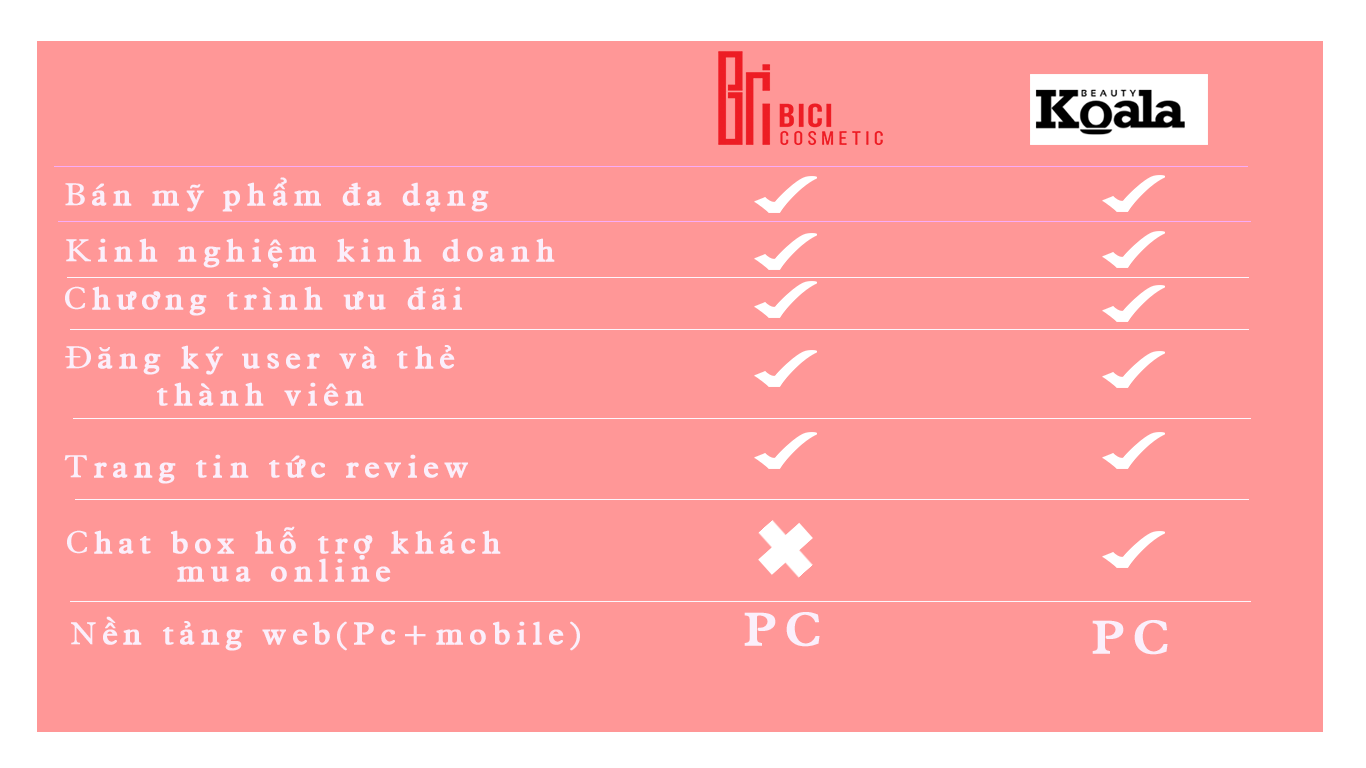
<style>
.page{position:relative;width:1366px;height:768px;background:#ff9797}
.page>*{position:absolute;margin:0}
.t1{font:30.8px "UVNAnhHai";letter-spacing:0.15em;color:#fbeffb;font-weight:bold;scale:1.08 1}
.t2{font:30.8px "UVNAnhHai";letter-spacing:0.15em;color:#fbeffb;font-variant:small-caps;scale:1.08 1}
.t3{font:30.8px/9.3px "UVNAnhHai";letter-spacing:0.15em;color:#fbeffb;font-weight:bold;scale:1.08 1}
.t4{font:30.8px/9.3px "UVNAnhHai";letter-spacing:0.15em;color:#fbeffb;font-variant:small-caps;scale:1.08 1}
.t5{font:45.5px "UVNAnhHai";letter-spacing:0.15em;color:#fbeffb;font-weight:bold;scale:1.13 1}
</style>
<div class="page">
<p class="t1" style="left:65px;top:177px;width:424px;height:35px"><span class="t2">B</span>án mỹ phẩm đa dạng</p>
<p class="t1" style="left:66px;top:238px;width:489px;height:30px"><span class="t2">K</span>inh nghiệm kinh doanh</p>
<p class="t1" style="left:65px;top:286px;width:397px;height:30px"><span class="t2">C</span>hương trình ưu đãi</p>
<p class="t3" style="left:65px;top:345px;width:390px;height:61px;text-align:center"><span class="t4">Đ</span>ăng ký user và thẻ <br><br><br><br>thành viên</p>
<p class="t1" style="left:64px;top:454px;width:404px;height:30px"><span class="t2">T</span>rang tin tức review</p>
<p class="t3" style="left:67px;top:526px;width:434px;height:56px;text-align:center"><span class="t4">C</span>hat box hỗ trợ khách <br><br><br>mua online</p>
<p class="t1" style="left:71px;top:616px;width:509px;height:35px"><span class="t2">N</span>ền tảng web(Pc+mobile)</p>
<p class="t5" style="left:744px;top:612px;width:76px;height:35px">PC</p>
<p class="t5" style="left:1092px;top:620px;width:76px;height:35px">PC</p>
</div>
